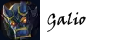
<style>
.page{position:relative;width:140px;height:40px;background:#ffffff}
.page>*{position:absolute;margin:0}
.t1{font:12px "VinerHandITC";color:#000000}
</style>
<div class="page">
<p class="t1" style="left:47px;top:12px;width:39px;height:20px">Galio</p>
</div>
